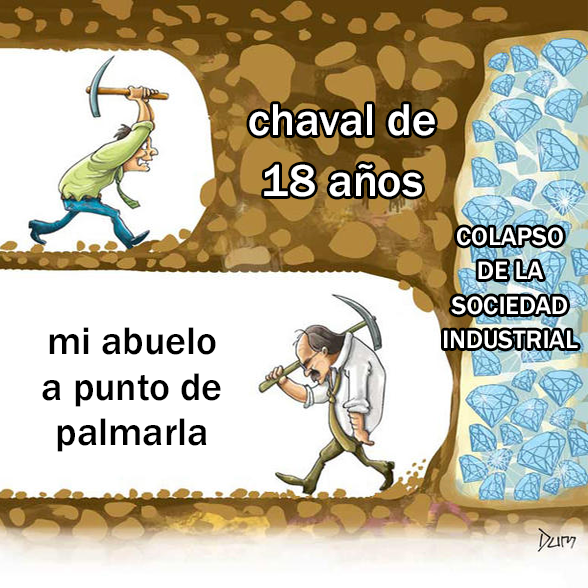
<style>
.page{position:relative;width:588px;height:588px;background:#ffffff}
.page>*{position:absolute;margin:0}
.t1{font:46.1px "FranklinGothic-Medium";color:#ffffff}
.t2{font:26px "FranklinGothic-Medium";color:#ffffff;text-transform:uppercase}
.t3{font:39.6px "FranklinGothic-Medium";color:#000000}
</style>
<div class="page">
<p class="t1" style="left:249px;top:104px;width:186px;height:93px;text-align:center">chaval de<br>18 años</p>
<p class="t2" style="left:444px;top:227px;width:134px;height:122px;text-align:center">colapso<br>de la<br>sociedad<br>industrial</p>
<p class="t3" style="left:42px;top:327px;width:179px;height:125px;text-align:center">mi abuelo<br>a punto de<br>palmarla</p>
</div>
